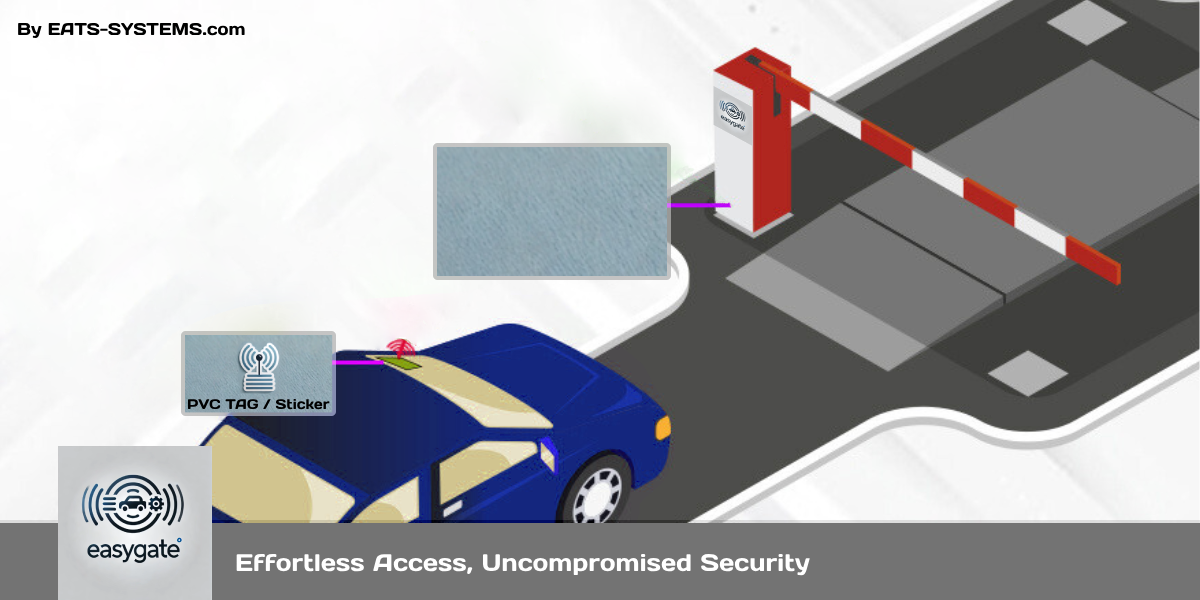
<style>
.page{position:relative;width:1200px;height:600px}
.page>*{position:absolute;margin:0}
.t1{font:17px "DaysOne-Regular";color:#000000}
.t2{font:24px "DaysOne-Regular";color:#ffffff}
</style>
<div class="page">
<p class="t1" style="left:18px;top:23px;width:227px;height:15px">By EATS-SYSTEMS.com</p>
<p class="t2" style="left:236px;top:553px;width:574px;height:23px">Effortless Access, Uncompromised Security</p>
</div>
